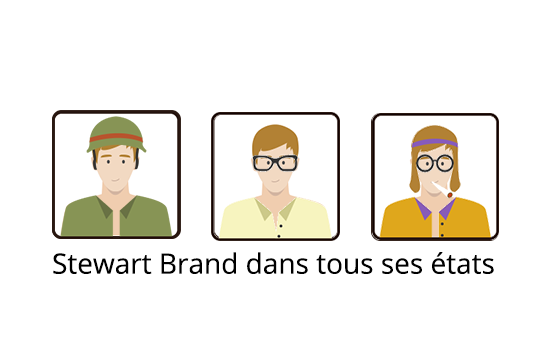
<style>
.page{position:relative;width:550px;height:350px;background:#ffffff}
.page>*{position:absolute;margin:0}
.t1{font:28px "OpenSans-Regular";color:#000000}
</style>
<div class="page">
<p class="t1" style="left:53px;top:252px;width:441px;height:22px">Stewart Brand dans tous ses états</p>
</div>
